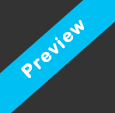
<style>
.page{position:relative;width:115px;height:113px;background:#333333}
.page>*{position:absolute;margin:0}
.t1{font:18px "ArialRoundedMTBold";letter-spacing:0.05em;color:#ffffff;font-weight:bold}
</style>
<div class="page">
<p class="t1" style="left:21px;top:20px;width:63px;height:58px;rotate:-42deg">Preview</p>
</div>
